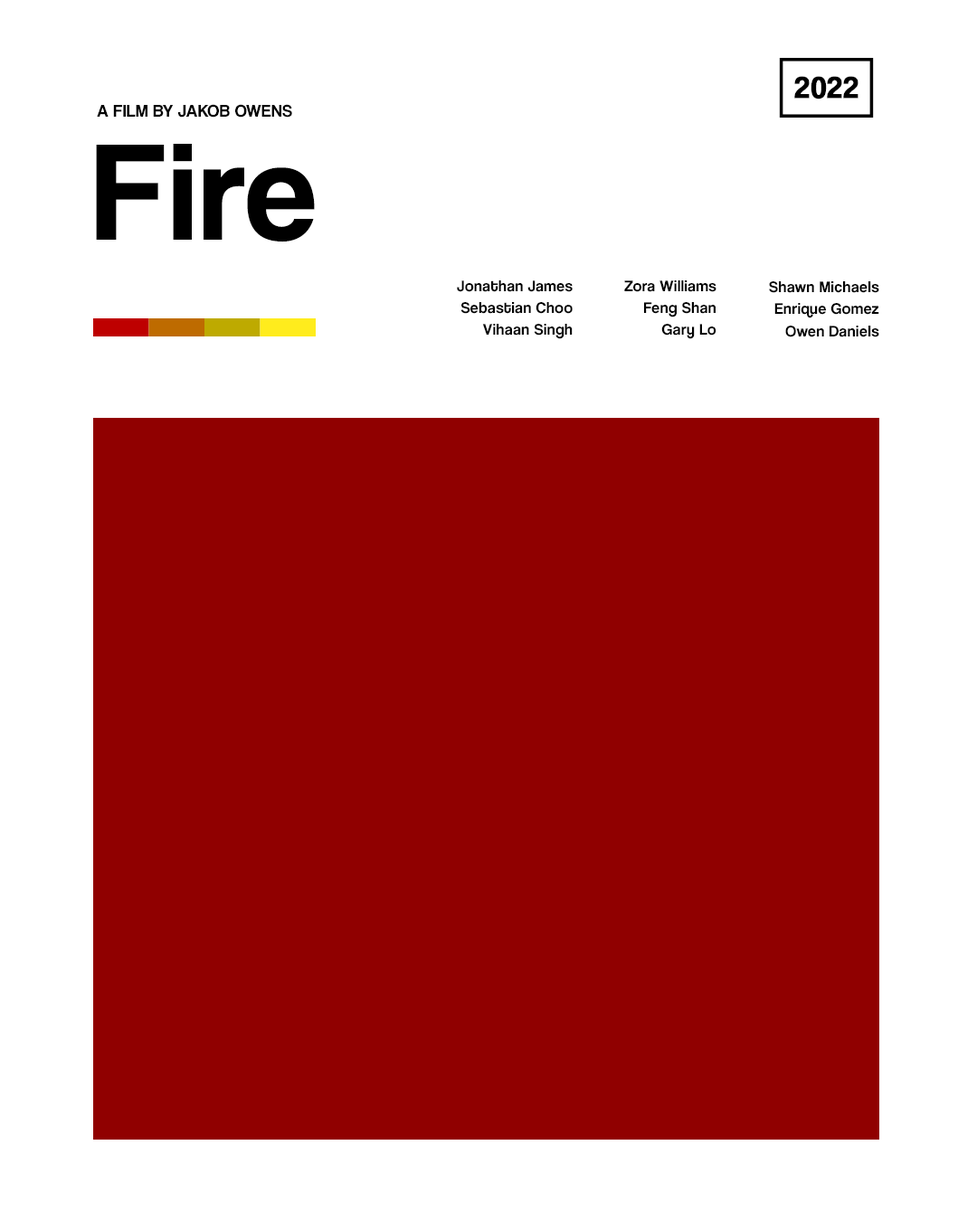
<style>
.page{position:relative;width:977px;height:1221px;background:#ffffff}
.page>*{position:absolute;margin:0}
.t1{font:30.9px "CoolveticaRg-Regular";letter-spacing:0.025em;color:#000000;font-weight:bold}
.t2{font:17.6px "CoolveticaRg-Regular";letter-spacing:0.025em;color:#000000;text-transform:uppercase}
.t3{font:142.7px "CoolveticaRg-Regular";letter-spacing:0.025em;color:#000000}
.t4{font:16.1px "CoolveticaRg-Regular";letter-spacing:0.025em;color:#000000}
</style>
<div class="page">
<p class="t1" style="left:794px;top:76px;width:64px;height:23px">2022</p>
<p class="t2" style="left:97px;top:104px;width:195px;height:14px">A film by Jakob Owens</p>
<p class="t3" style="left:96px;top:144px;width:219px;height:98px">Fire</p>
<p class="t4" style="left:457px;top:280px;width:115px;height:12px">Jonathan James</p>
<p class="t4" style="left:624px;top:280px;width:92px;height:12px">Zora Williams</p>
<p class="t4" style="left:769px;top:281px;width:110px;height:12px">Shawn Michaels</p>
<p class="t4" style="left:460px;top:302px;width:112px;height:12px">Sebastian Choo</p>
<p class="t4" style="left:644px;top:302px;width:71px;height:15px">Feng Shan</p>
<p class="t4" style="left:774px;top:303px;width:105px;height:15px">Enrique Gomez</p>
<p class="t4" style="left:482px;top:324px;width:90px;height:15px">Vihaan Singh</p>
<p class="t4" style="left:661px;top:324px;width:55px;height:15px">Gary Lo</p>
<p class="t4" style="left:785px;top:326px;width:94px;height:11px">Owen Daniels</p>
</div>
